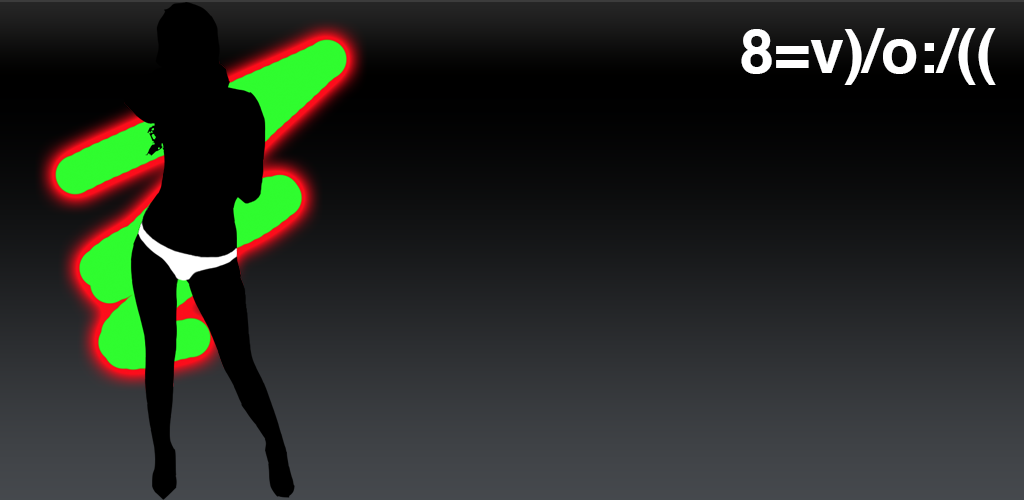
<style>
.page{position:relative;width:1024px;height:500px}
.page>*{position:absolute;margin:0}
.t1{font:61px "Helvetica-Bold";color:#ffffff}
</style>
<div class="page">
<p class="t1" style="left:741px;top:28px;width:255px;height:57px">8=v)/o:/((</p>
</div>
